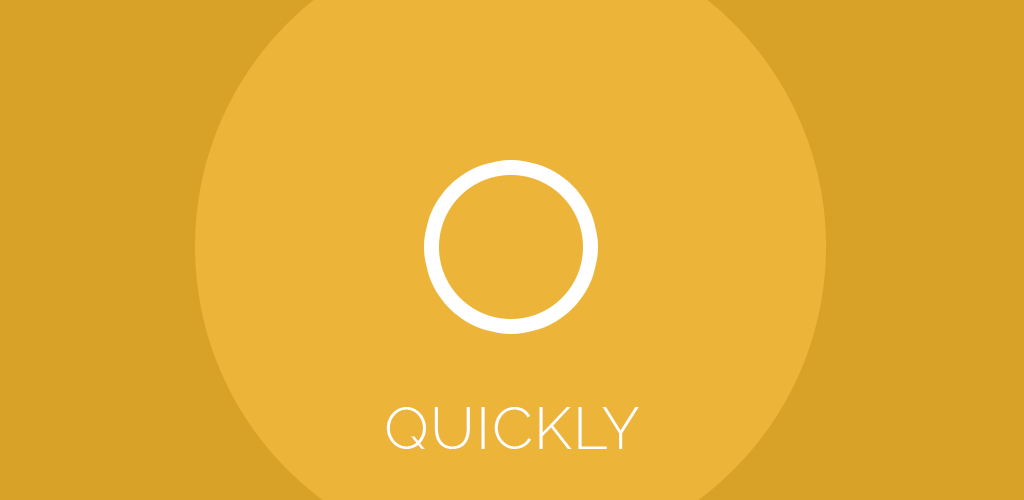
<style>
.page{position:relative;width:1024px;height:500px;background:#ecb438}
.page>*{position:absolute;margin:0}
.t1{font:59.4px "Raleway-Light";letter-spacing:0.02em;color:#ffffff}
</style>
<div class="page">
<p class="t1" style="left:386px;top:407px;width:253px;height:42px">QUICKLY</p>
</div>
